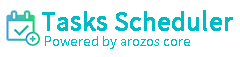
<style>
.page{position:relative;width:240px;height:57px;background:#ffffff}
.page>*{position:absolute;margin:0}
.t1{font:24px "TaipeiSansTCBeta-Regular";color:#00bac6;font-weight:bold}
.t2{font:13px "TaipeiSansTCBeta-Regular";color:#00bac6}
</style>
<div class="page">
<p class="t1" style="left:42px;top:10px;width:191px;height:21px">Tasks Scheduler</p>
<p class="t2" style="left:45px;top:36px;width:145px;height:13px">Powered by arozos core</p>
</div>
